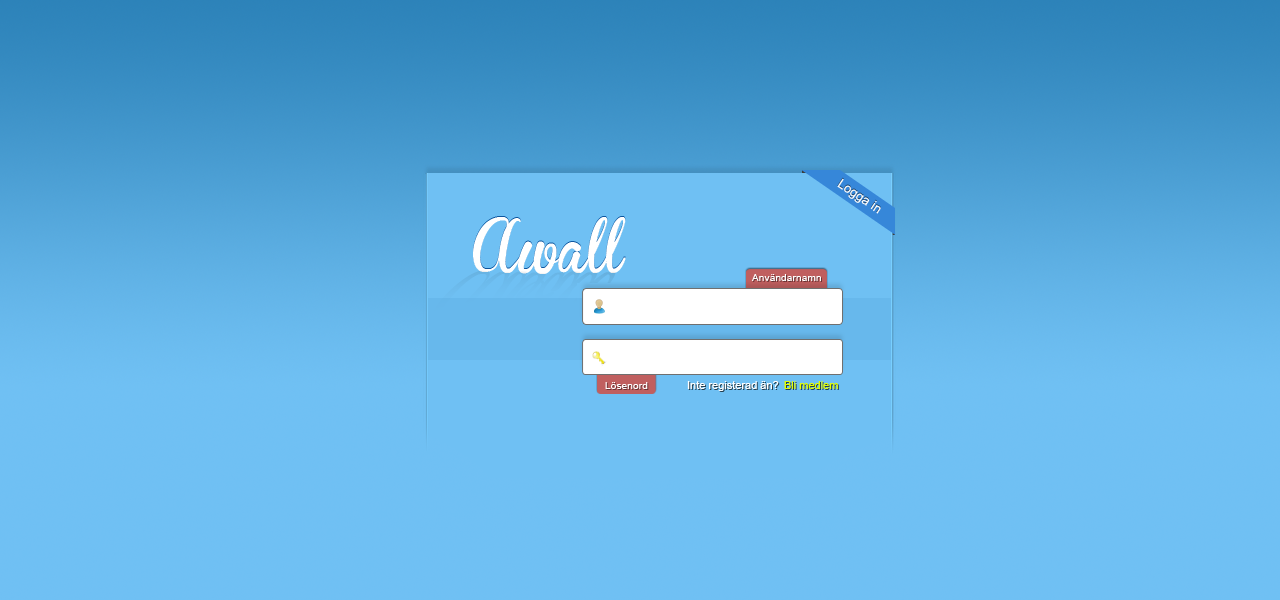
<style>
.page{position:relative;width:1280px;height:600px;background:#6fc0f3}
.page>*{position:absolute;margin:0}
.t1{font:13px "ArialMT";color:#ffffff}
.t2{font:52px "BrannbollFet";color:#ffffff}
.t3{font:10.3px "ArialMT";color:#ffffff}
.t4{font:11px "ArialMT";color:#ffffff}
.t5{font:11px "ArialMT";color:#e4ff00}
</style>
<div class="page">
<p class="t1" style="left:837px;top:178px;width:44px;height:36px;rotate:33deg">Logga in</p>
<p class="t2" style="left:473px;top:217px;width:153px;height:57px">Awall</p>
<p class="t3" style="left:751px;top:274px;width:70px;height:7px">Användarnamn</p>
<p class="t3" style="left:605px;top:382px;width:43px;height:7px">Lösenord</p>
<p class="t4" style="left:687px;top:381px;width:92px;height:10px">Inte registerad än?</p>
<p class="t5" style="left:784px;top:381px;width:54px;height:8px">Bli medlem</p>
</div>
